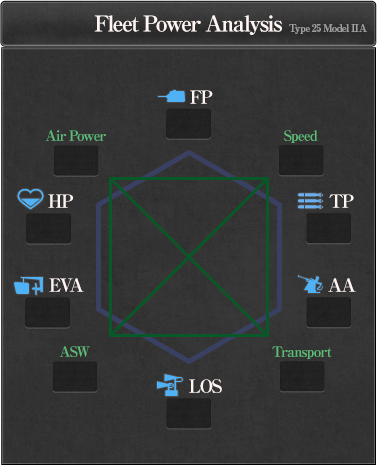
<style>
.page{position:relative;width:377px;height:465px}
.page>*{position:absolute;margin:0}
.t1{font:22px "RyuminPro-ExBold";letter-spacing:-0.08em;color:#fff6f3}
.t2{font:10px "RyuminPro-ExBold";letter-spacing:-0.08em;color:#9f9f9f}
.t3{font:18px "RyuminPro-ExBold";letter-spacing:-0.08em;color:#fff6f3}
.t4{font:14px "RyuminPro-ExBold";letter-spacing:-0.08em;color:#5fbb78}
</style>
<div class="page">
<p class="t1" style="left:94px;top:15px;width:188px;height:20px">Fleet Power Analysis</p>
<p class="t2" style="left:289px;top:24px;width:78px;height:10px">Type 25 Model IIA</p>
<p class="t3" style="left:190px;top:90px;width:23px;height:14px">FP</p>
<p class="t4" style="left:45px;top:130px;width:61px;height:11px">Air Power</p>
<p class="t4" style="left:284px;top:130px;width:34px;height:13px">Speed</p>
<p class="t3" style="left:48px;top:194px;width:25px;height:14px">HP</p>
<p class="t3" style="left:329px;top:194px;width:25px;height:14px">TP</p>
<p class="t3" style="left:49px;top:278px;width:35px;height:14px">EVA</p>
<p class="t3" style="left:328px;top:278px;width:28px;height:14px">AA</p>
<p class="t4" style="left:59px;top:346px;width:31px;height:11px">ASW</p>
<p class="t4" style="left:272px;top:346px;width:60px;height:13px">Transport</p>
<p class="t3" style="left:189px;top:379px;width:33px;height:14px">LOS</p>
</div>
